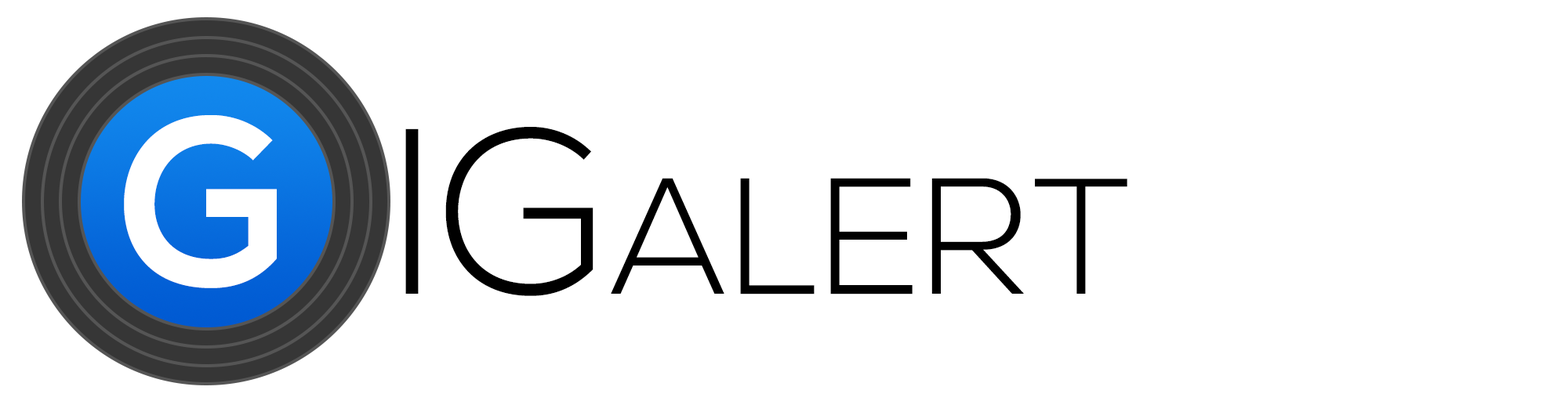
<style>
.page{position:relative;width:1568px;height:401px;background:#ffffff}
.page>*{position:absolute;margin:0}
.t1{font:235.2px "NexaLight";color:#000000;font-variant:small-caps}
</style>
<div class="page">
<p class="t1" style="left:405px;top:127px;width:722px;height:169px">IGalert</p>
</div>
